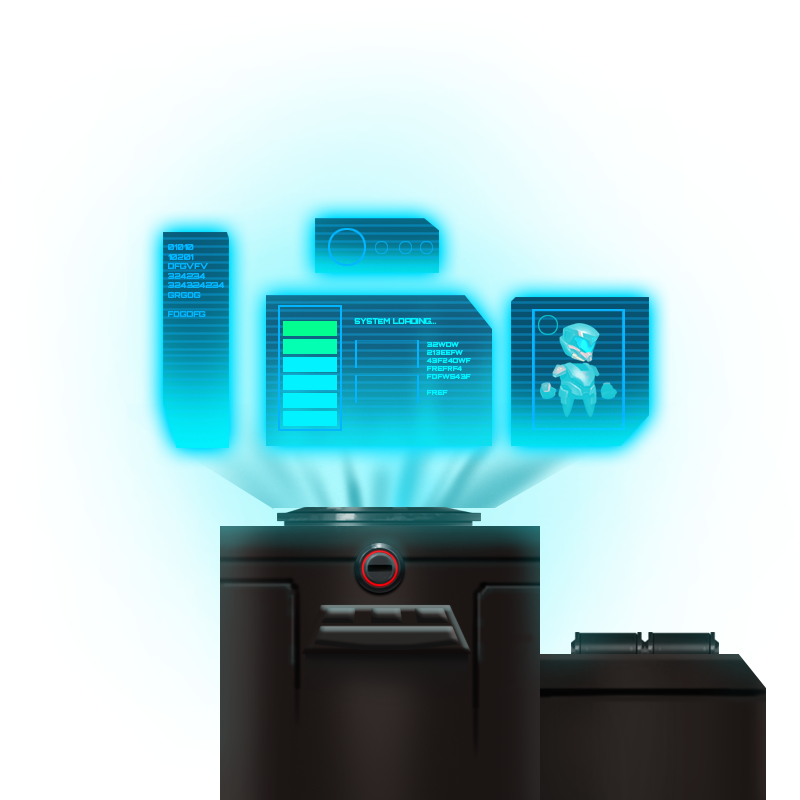
<style>
.page{position:relative;width:800px;height:800px}
.page>*{position:absolute;margin:0}
.t1{font:7.9px "Orbitron-Bold";color:#02b6ff}
.t2{font:7.4px "Orbitron-Bold";color:#02f3ff}
.t3{font:6.7px "Orbitron-Bold";color:#02f3ff}
</style>
<div class="page">
<p class="t1" style="left:168px;top:244px;width:56px;height:73px">01010<br>10201<br>DFGVFV<br>324234<br>324324234<br>GRGDG<br><br>FDGDFG</p>
<p class="t2" style="left:354px;top:318px;width:82px;height:6px">SYSTEM LOADING...</p>
<p class="t3" style="left:426px;top:342px;width:45px;height:53px">32WDW<br>213EEFW<br>43F24DWF<br>FREFRF4<br>FDFWS43F<br><br>FREF</p>
</div>
